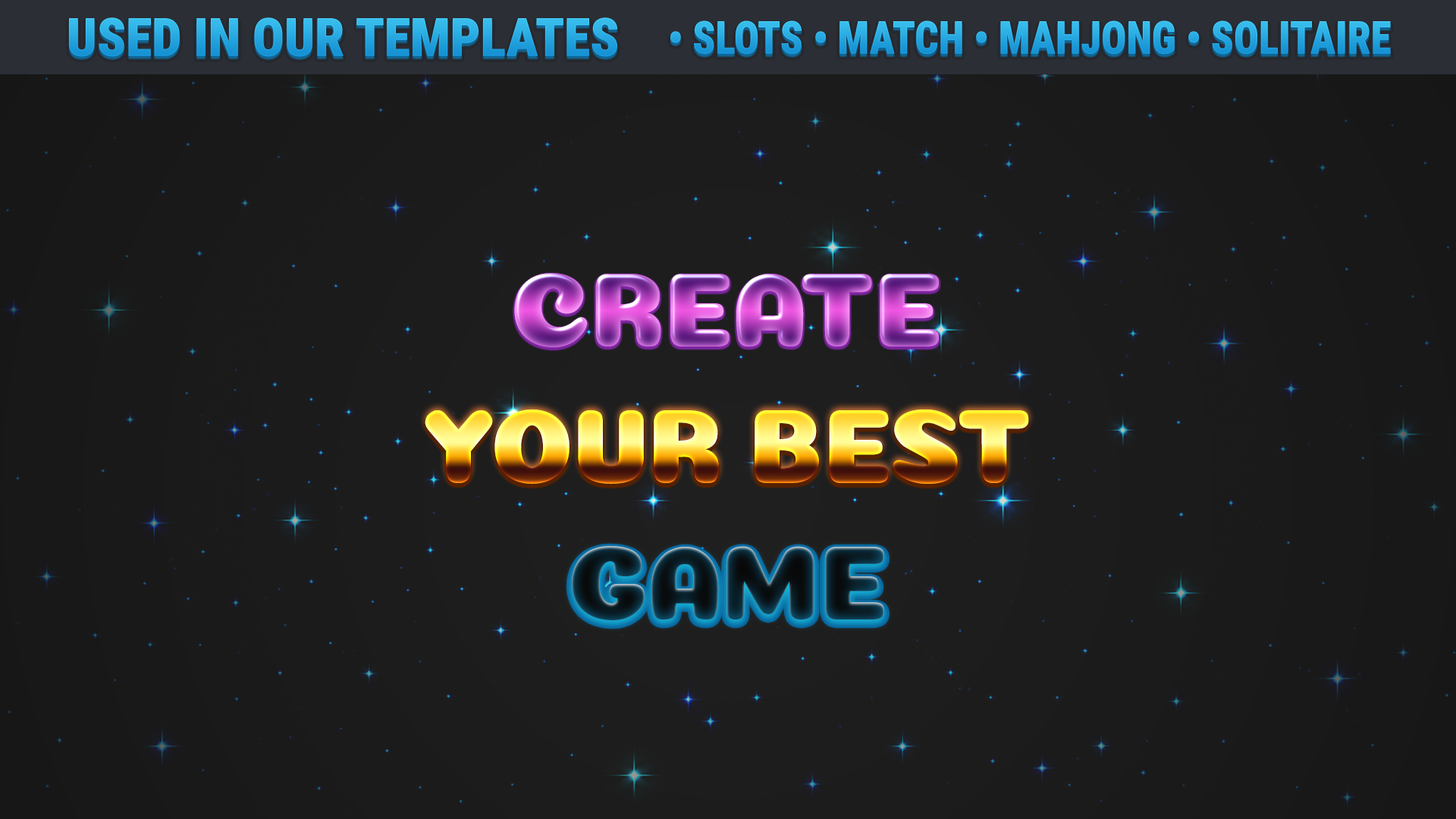
<style>
.page{position:relative;width:1456px;height:819px}
.page>*{position:absolute;margin:0}
.t1{font:53.1px "RobotoCondensed-Black";color:#15a9e0;text-transform:uppercase}
.t2{font:45.5px "RobotoCondensed-Black";color:#15a9e0;text-transform:uppercase;scale:0.91 1}
.t3{font:106.2px "Coiny-Regular";letter-spacing:-0.025em;text-transform:uppercase}
</style>
<div class="page">
<p class="t1" style="left:69px;top:17px;width:548px;height:40px">Used in our Templates</p>
<p class="t2" style="left:670px;top:20px;width:721px;height:35px">• Slots • Match • Mahjong • Solitaire</p>
<p class="t3" style="left:514px;top:273px;width:425px;height:74px">Create</p>
<p class="t3" style="left:425px;top:409px;width:604px;height:75px">your best</p>
<p class="t3" style="left:572px;top:546px;width:312px;height:74px">game</p>
</div>
